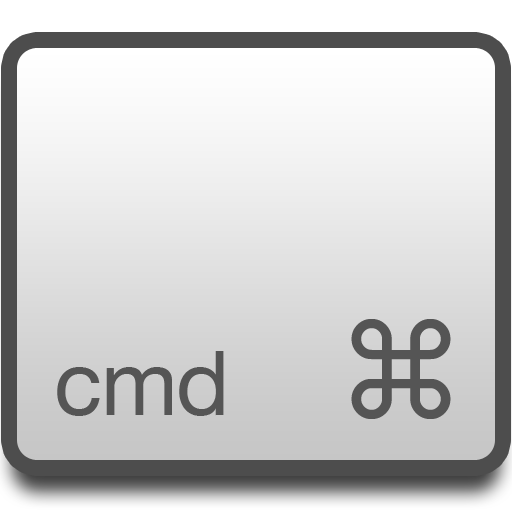
<style>
.page{position:relative;width:512px;height:512px}
.page>*{position:absolute;margin:0}
.t1{font:130px "LucidaGrande";color:#555555}
.t2{font:90px "HelveticaNeue";color:#555555}
</style>
<div class="page">
<p class="t1" style="left:351px;top:319px;width:100px;height:100px">⌘</p>
<p class="t2" style="left:57px;top:351px;width:167px;height:65px">cmd</p>
</div>
